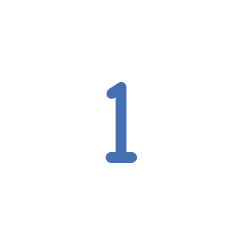
<style>
.page{position:relative;width:245px;height:245px;background:#ffffff}
.page>*{position:absolute;margin:0}
.t1{font:120px "Chalkboard";color:#446fb1}
</style>
<div class="page">
<p class="t1" style="left:105px;top:82px;width:33px;height:81px">1</p>
</div>
